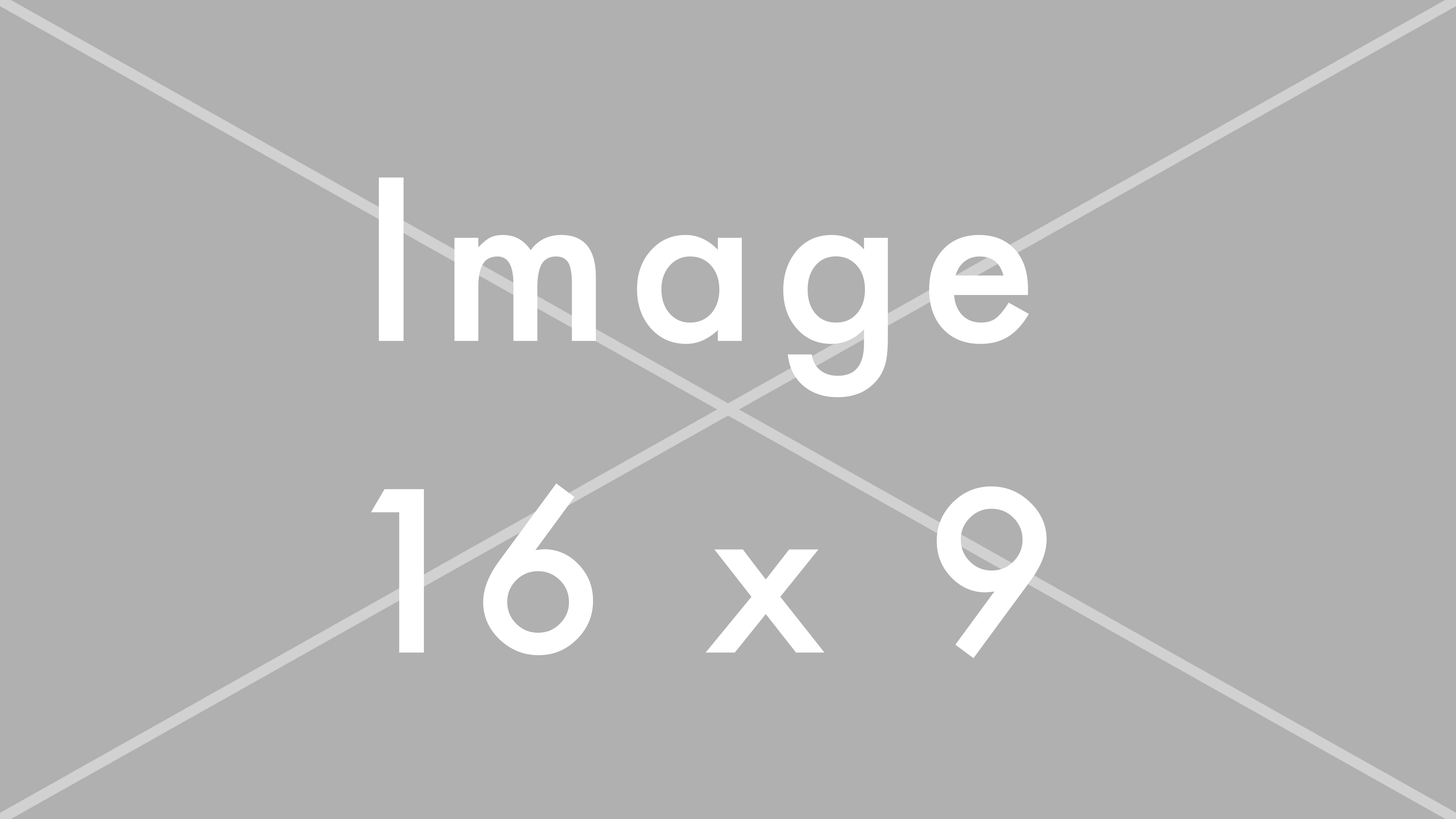
<style>
.page{position:relative;width:1456px;height:819px;background:#b0b0b0}
.page>*{position:absolute;margin:0}
.t1{font:216.7px "Futura-Medium";letter-spacing:0.075em;color:#ffffff}
</style>
<div class="page">
<p class="t1" style="left:379px;top:177px;width:650px;height:220px">Image</p>
<p class="t1" style="left:371px;top:483px;width:676px;height:175px">16 x 9</p>
</div>
